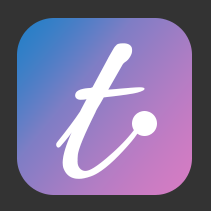
<style>
.page{position:relative;width:211px;height:211px;background:#333333}
.page>*{position:absolute;margin:0}
.t1{font:295px "Allura-Regular";color:#ffffff}
</style>
<div class="page">
<p class="t1" style="left:56px;top:43px;width:89px;height:136px">t</p>
</div>
